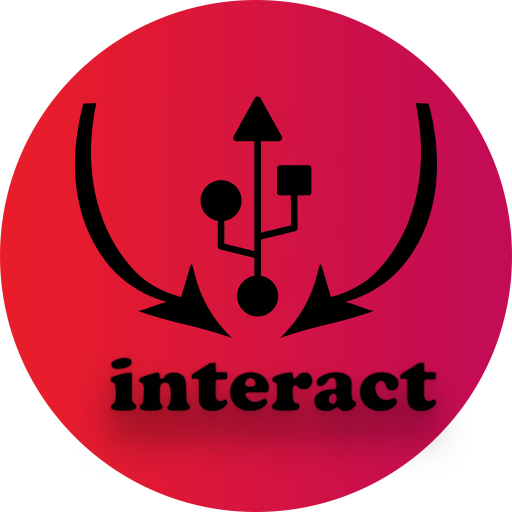
<style>
.page{position:relative;width:512px;height:512px}
.page>*{position:absolute;margin:0}
.t1{font:80.1px "CooperBlack";color:#010101}
</style>
<div class="page">
<p class="t1" style="left:110px;top:357px;width:327px;height:55px">interact</p>
</div>
